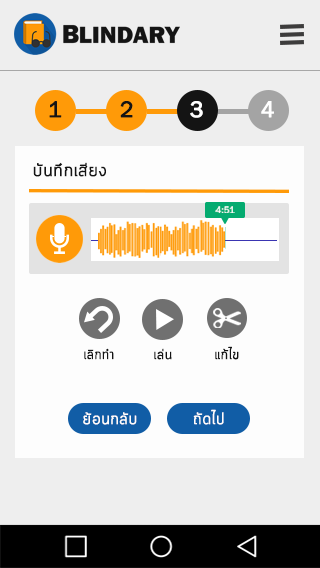
<style>
.page{position:relative;width:320px;height:568px;background:#eeeeee}
.page>*{position:absolute;margin:0}
.t1{font:23px "FranklinGothic-Book";color:#141414;font-weight:bold}
.t2{font:23px "FranklinGothic-Book";color:#ffffff;font-weight:bold}
.t3{font:18px "Cloud-Light";color:#141414;font-weight:bold}
.t4{font:9.5px "FranklinGothic-Book";color:#ffffff;font-weight:bold}
.t5{font:13.9px "Cloud-Light";color:#141414;font-weight:bold;scale:0.97 1}
.t6{font:13.9px "Cloud-Light";color:#141414;font-weight:bold}
.t7{font:16.2px "Cloud-Light";color:#fefdfd;font-weight:bold}
</style>
<div class="page">
<p class="t1" style="left:49px;top:101px;width:13px;height:17px">1</p>
<p class="t1" style="left:120px;top:101px;width:13px;height:17px">2</p>
<p class="t2" style="left:190px;top:101px;width:13px;height:17px">3</p>
<p class="t2" style="left:261px;top:101px;width:13px;height:17px">4</p>
<p class="t3" style="left:33px;top:162px;width:73px;height:15px">บันทึกเสียง</p>
<p class="t4" style="left:215px;top:206px;width:20px;height:7px">4:51</p>
<p class="t5" style="left:84px;top:348px;width:30px;height:12px">เลิกทำ</p>
<p class="t6" style="left:154px;top:348px;width:18px;height:12px">เล่น</p>
<p class="t6" style="left:215px;top:346px;width:24px;height:14px">แก้ไข</p>
<p class="t7" style="left:83px;top:412px;width:54px;height:13px">ย้อนกลับ</p>
<p class="t7" style="left:193px;top:409px;width:31px;height:16px">ถัดไป</p>
</div>
